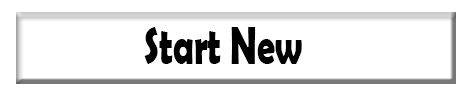
<style>
.page{position:relative;width:470px;height:98px;background:#ffffff}
.page>*{position:absolute;margin:0}
.t1{font:52.3px "BerlinSansFBDemi-Bold";color:#000000;scale:0.69 1}
</style>
<div class="page">
<p class="t1" style="left:144px;top:27px;width:158px;height:37px">Start New</p>
</div>
